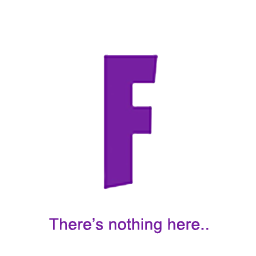
<style>
.page{position:relative;width:256px;height:256px;background:#ffffff}
.page>*{position:absolute;margin:0}
.t1{font:16px "ArialMT";letter-spacing:0.015em;color:#761fa1}
</style>
<div class="page">
<p class="t1" style="left:49px;top:218px;width:160px;height:16px">There’s nothing here..</p>
</div>
